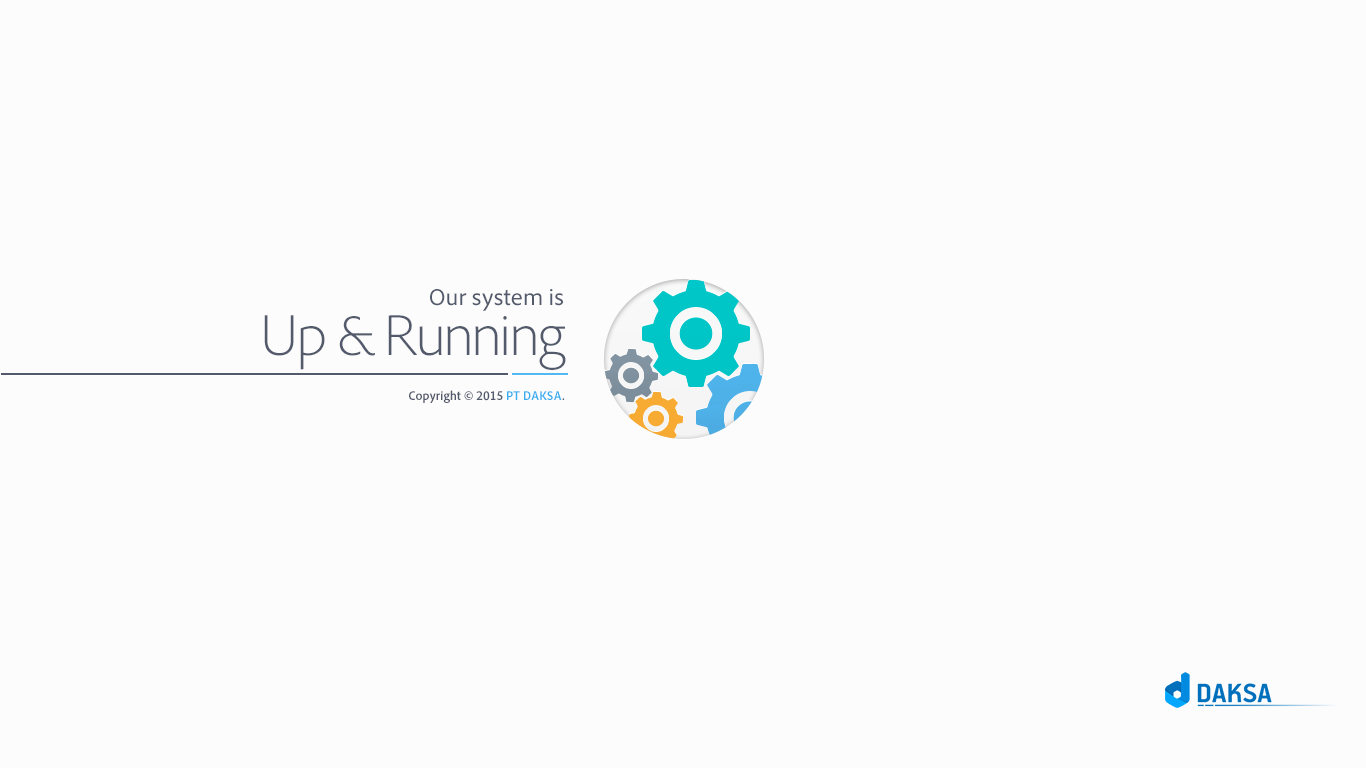
<style>
.page{position:relative;width:1366px;height:768px;background:#fcfcfc}
.page>*{position:absolute;margin:0}
.t1{font:24px "AdobeClean-Regular";color:#535a6c}
.t2{font:60px "AdobeClean-Light";letter-spacing:-0.05em;color:#535a6c}
.t3{font:13px "AdobeClean-BoldSemiCn";color:#535a6c}
.t4{font:13px "AdobeClean-BoldSemiCn";color:#38aef0}
</style>
<div class="page">
<p class="t1" style="left:430px;top:289px;width:133px;height:22px">Our system is</p>
<p class="t2" style="left:264px;top:315px;width:302px;height:55px">Up &amp; Running</p>
<p class="t3" style="left:409px;top:390px;width:156px;height:13px">Copyright © 2015 <span class="t4">PT DAKSA</span>.</p>
</div>
